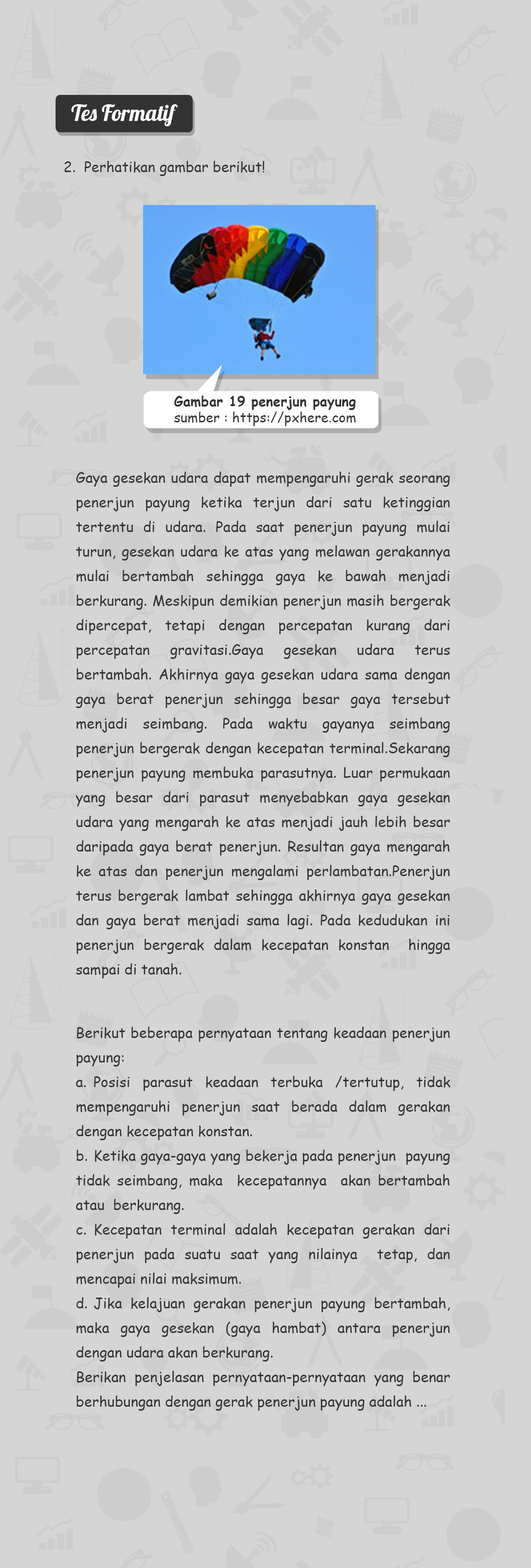
<style>
.page{position:relative;width:531px;height:1568px;background:#d5d5d5}
.page>*{position:absolute;margin:0}
.t1{font:21.9px "Lobster-Regular";color:#ffffff}
.t2{font:14.3px "ComicSansMS";color:#333333}
.t3{font:13.7px/16.5px "ComicSansMS";color:#333333}
.t4{font:13.7px/16.5px "ComicSansMS-Bold";color:#333333}
.t5{font:14.3px/24.6px "ComicSansMS";color:#333333}
</style>
<div class="page">
<p class="t1" style="left:71px;top:104px;width:107px;height:22px">Tes Formatif</p>
<p class="t2" style="left:64px;top:161px;width:11px;height:11px">2.</p>
<p class="t2" style="left:85px;top:161px;width:180px;height:15px">Perhatikan gambar berikut!</p>
<p class="t3" style="left:174px;top:395px;width:182px;height:31px"><span class="t4">Gambar 19 penerjun payung<br></span>sumber : https://pxhere.com</p>
<p class="t5" style="left:76px;top:472px;width:374px;height:506px;text-align:justify">Gaya gesekan udara dapat mempengaruhi gerak seorang penerjun payung ketika terjun dari satu ketinggian tertentu di udara. Pada saat penerjun payung mulai turun, gesekan udara ke atas yang melawan gerakannya mulai bertambah sehingga gaya ke bawah menjadi berkurang. Meskipun demikian penerjun masih bergerak dipercepat, tetapi dengan percepatan kurang dari percepatan gravitasi.Gaya gesekan udara terus bertambah. Akhirnya gaya gesekan udara sama dengan gaya berat penerjun sehingga besar gaya tersebut menjadi seimbang. Pada waktu gayanya seimbang penerjun bergerak dengan kecepatan terminal.Sekarang penerjun payung membuka parasutnya. Luar permukaan yang besar dari parasut menyebabkan gaya gesekan udara yang mengarah ke atas menjadi jauh lebih besar daripada gaya berat penerjun. Resultan gaya mengarah ke atas dan penerjun mengalami perlambatan.Penerjun terus bergerak lambat sehingga akhirnya gaya gesekan dan gaya berat menjadi sama lagi. Pada kedudukan ini penerjun bergerak dalam kecepatan konstan  hingga sampai di tanah.</p>
<p class="t5" style="left:76px;top:1027px;width:374px;height:384px;text-align:justify">Berikut beberapa pernyataan tentang keadaan penerjun payung:<br>a. Posisi parasut keadaan terbuka /tertutup, tidak mempengaruhi penerjun saat berada dalam gerakan dengan kecepatan konstan.<br>b. Ketika gaya-gaya yang bekerja pada penerjun  payung tidak seimbang, maka  kecepatannya  akan bertambah atau  berkurang.<br>c. Kecepatan terminal adalah kecepatan gerakan dari penerjun pada suatu saat yang nilainya  tetap, dan mencapai nilai maksimum.<br>d. Jika kelajuan gerakan penerjun payung bertambah, maka gaya gesekan (gaya hambat) antara penerjun dengan udara akan berkurang.<br>Berikan penjelasan pernyataan-pernyataan yang benar berhubungan dengan gerak penerjun payung adalah ...</p>
</div>
